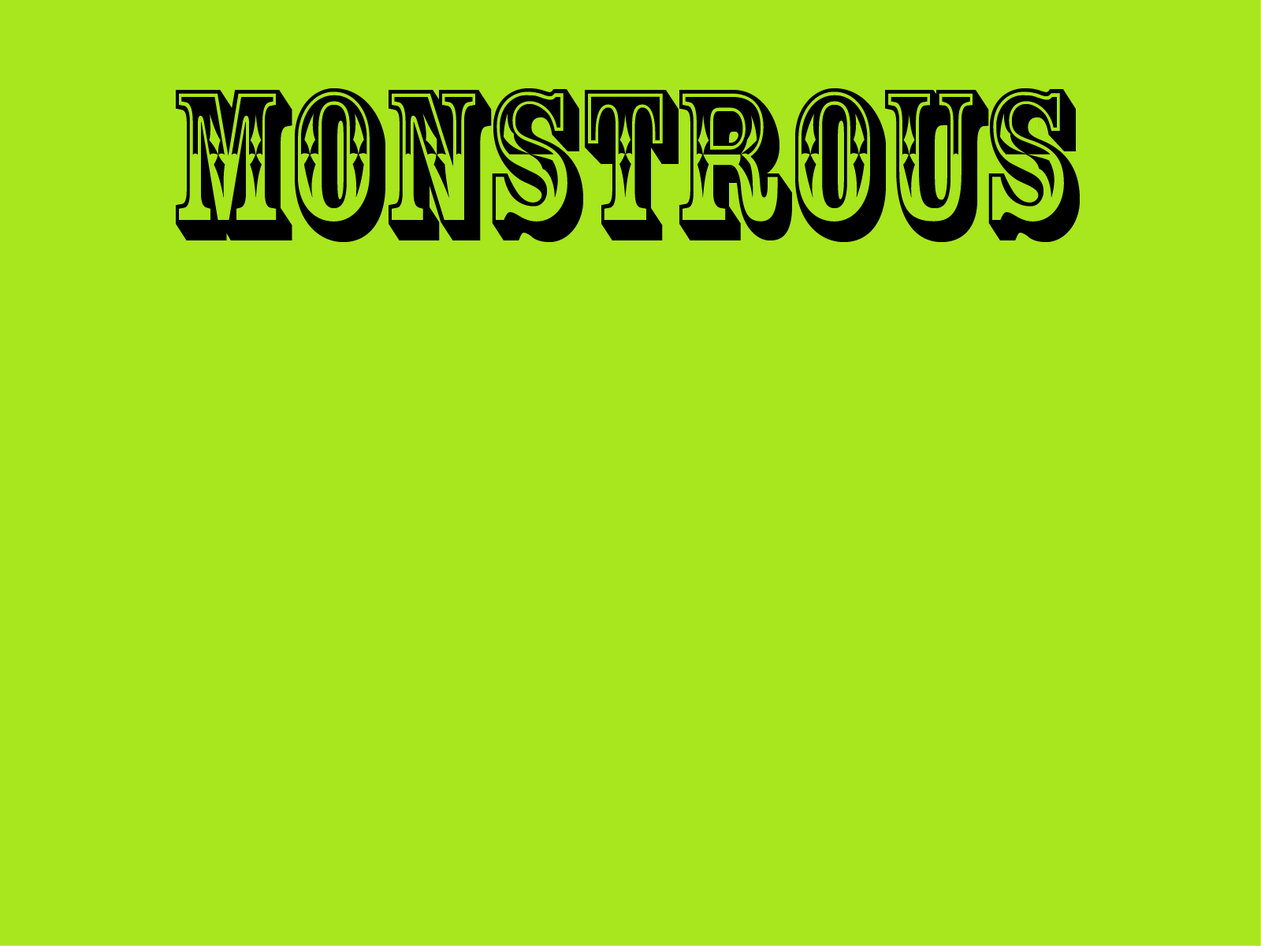
<style>
.page{position:relative;width:1261px;height:946px;background:#a8e61d}
.page>*{position:absolute;margin:0}
.t1{font:200.9px "RosewoodStd-Regular";color:#000000;scale:0.86 1}
</style>
<div class="page">
<p class="t1" style="left:176px;top:88px;width:904px;height:154px">MONSTROUS</p>
</div>
